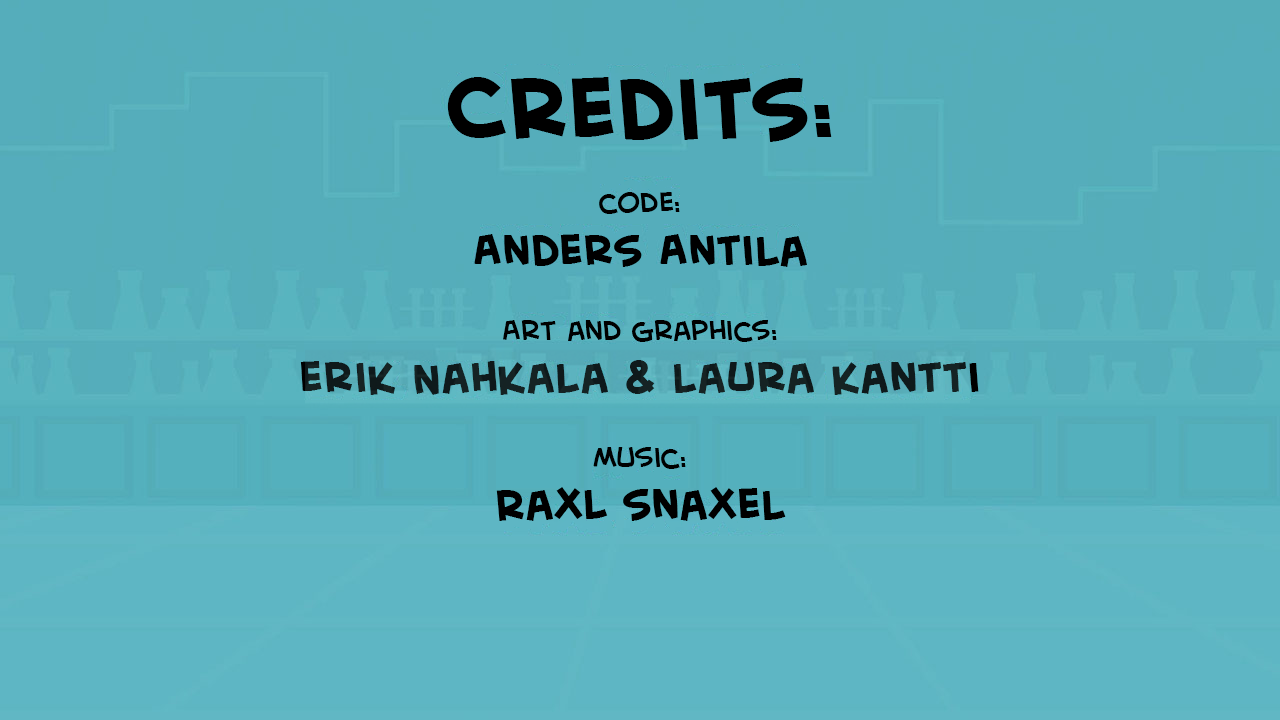
<style>
.page{position:relative;width:1280px;height:720px;background:#55adbb}
.page>*{position:absolute;margin:0}
.t1{font:42px "CreativeBlockBBBold";color:#000000}
.t2{font:85px "CreativeBlockBBBold";color:#000000}
.t3{font:32px "CreativeBlockBB";color:#000000}
</style>
<div class="page">
<p class="t1" style="left:300px;top:77px;width:679px;height:444px;text-align:center"><span class="t2">Credits:<br></span><span class="t3"><br>code:<br></span>Anders Antila<br><span class="t3"><br>Art and graphics:<br></span>erik Nahkala &amp; laura kantti<br><span class="t3"><br>Music:<br></span>RaxL snaxel</p>
</div>
